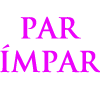
<style>
.page{position:relative;width:100px;height:100px;background:#ffffff}
.page>*{position:absolute;margin:0}
.t1{font:28px "TrajanPro-Bold";color:#ec03fb}
</style>
<div class="page">
<p class="t1" style="left:0px;top:16px;width:102px;height:57px;text-align:center">PAR<br>ÍMPAR</p>
</div>
